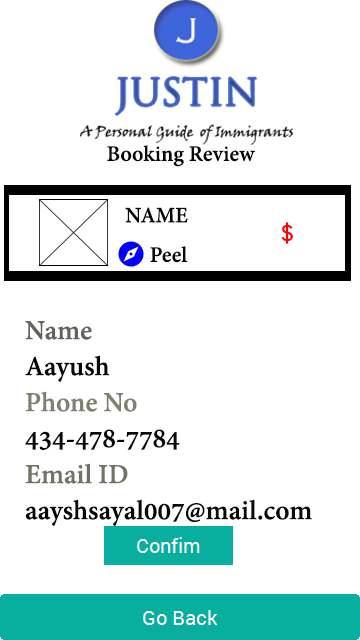
<style>
.page{position:relative;width:360px;height:640px;background:#ffffff}
.page>*{position:absolute;margin:0}
.t1{font:24px "AdobeDevanagari-Bold";color:#070707}
.t2{font:30px "AdobeDevanagari-Bold";color:#070707}
.t3{font:30px "AdobeDevanagari-Bold";color:#63635e}
.t4{font:30px "AdobeDevanagari-Bold";color:#7f7f72}
.t5{font:30px "AdobeDevanagari-Bold";color:#727265}
</style>
<div class="page">
<p class="t1" style="left:107px;top:145px;width:148px;height:22px">Booking Review</p>
<p class="t1" style="left:125px;top:207px;width:63px;height:16px">NAME</p>
<p class="t1" style="left:150px;top:246px;width:38px;height:17px">Peel</p>
<p class="t2" style="left:25px;top:321px;width:287px;height:205px"><span class="t3">Name<br></span>Aayush<br><span class="t4">Phone No<br></span>434-478-7784<br><span class="t5">Email ID<br></span>aayshsayal007@mail.com</p>
</div>
